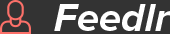
<style>
.page{position:relative;width:170px;height:34px;background:#333333}
.page>*{position:absolute;margin:0}
.t1{font:40px "ProximaNova-BoldIt";color:#ffffff}
</style>
<div class="page">
<p class="t1" style="left:54px;top:4px;width:117px;height:27px">Feedlr</p>
</div>
